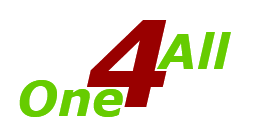
<style>
.page{position:relative;width:256px;height:128px;background:#ffffff}
.page>*{position:absolute;margin:0}
.t1{font:120px "Verdana-BoldItalic";color:#990000}
.t2{font:48px "Verdana-BoldItalic";color:#66cc00}
</style>
<div class="page">
<p class="t1" style="left:87px;top:20px;width:80px;height:87px">4</p>
<p class="t2" style="left:156px;top:32px;width:75px;height:37px">All</p>
<p class="t2" style="left:19px;top:80px;width:104px;height:37px">One</p>
</div>
